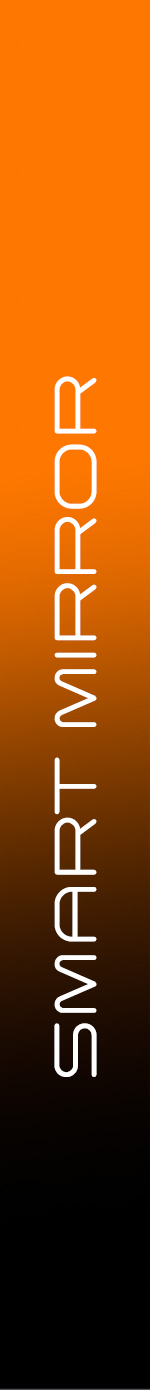
<style>
.page{position:relative;width:150px;height:1390px;background:#fe7701}
.page>*{position:absolute;margin:0}
.t1{font:60px "ArkitechRound-Light";color:#ffffff;font-variant:small-caps}
</style>
<div class="page">
<p class="t1" style="left:54px;top:376px;width:43px;height:701px;rotate:-90deg">SMART MIRROR</p>
</div>
